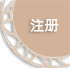
<style>
.page{position:relative;width:70px;height:68px;background:#d2b299}
.page>*{position:absolute;margin:0}
.t1{font:14px "STHeitiSC-Light";color:#fbfaf9;font-weight:bold}
</style>
<div class="page">
<p class="t1" style="left:30px;top:19px;width:29px;height:13px">注册</p>
</div>
